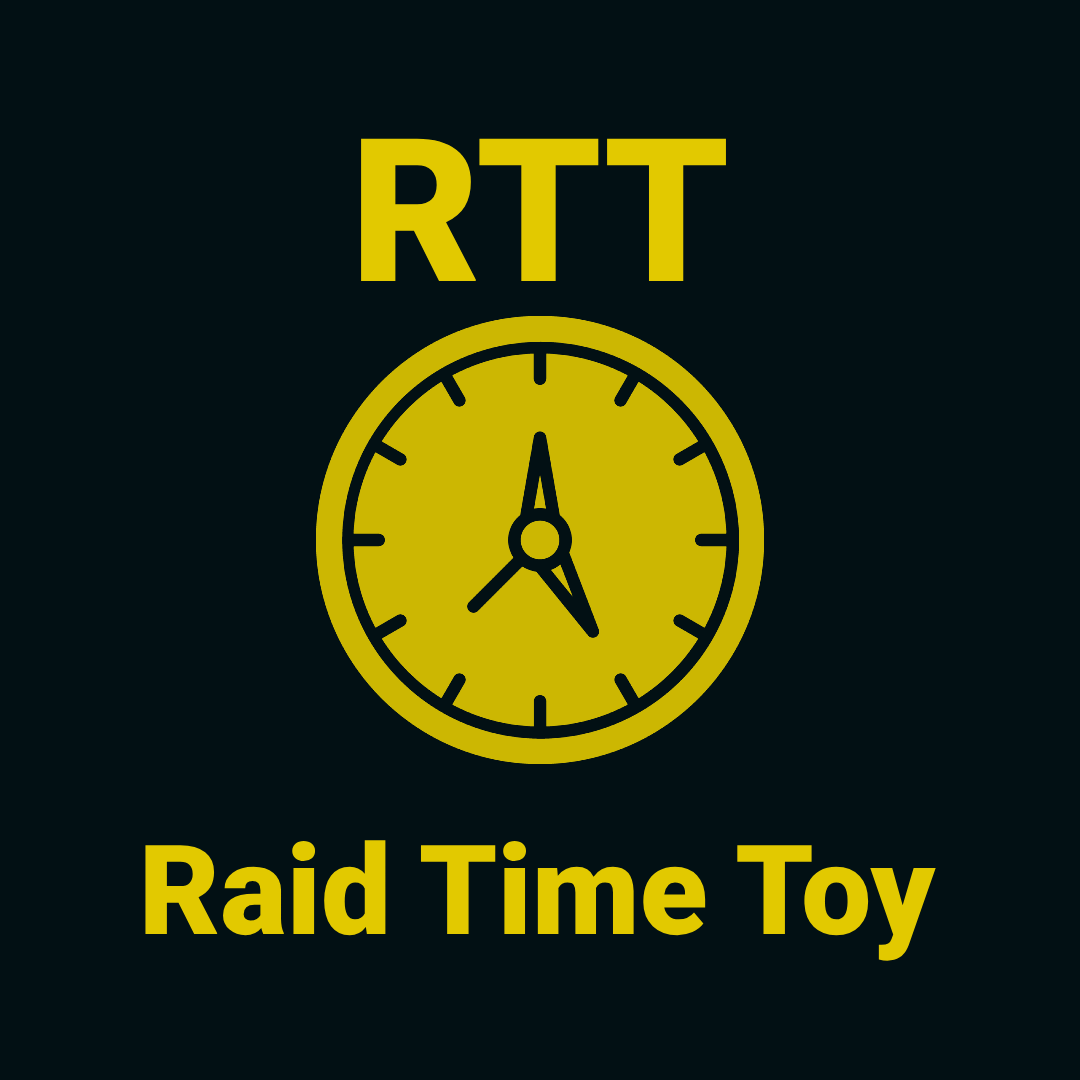
<style>
.page{position:relative;width:1080px;height:1080px;background:#021014}
.page>*{position:absolute;margin:0}
.t1{font:200px "Roboto-Black";color:#e2c900}
.t2{font:125px "Roboto-Black";color:#e2c900}
</style>
<div class="page">
<p class="t1" style="left:361px;top:138px;width:365px;height:143px">RTT</p>
<p class="t2" style="left:145px;top:840px;width:791px;height:121px">Raid Time Toy</p>
</div>
